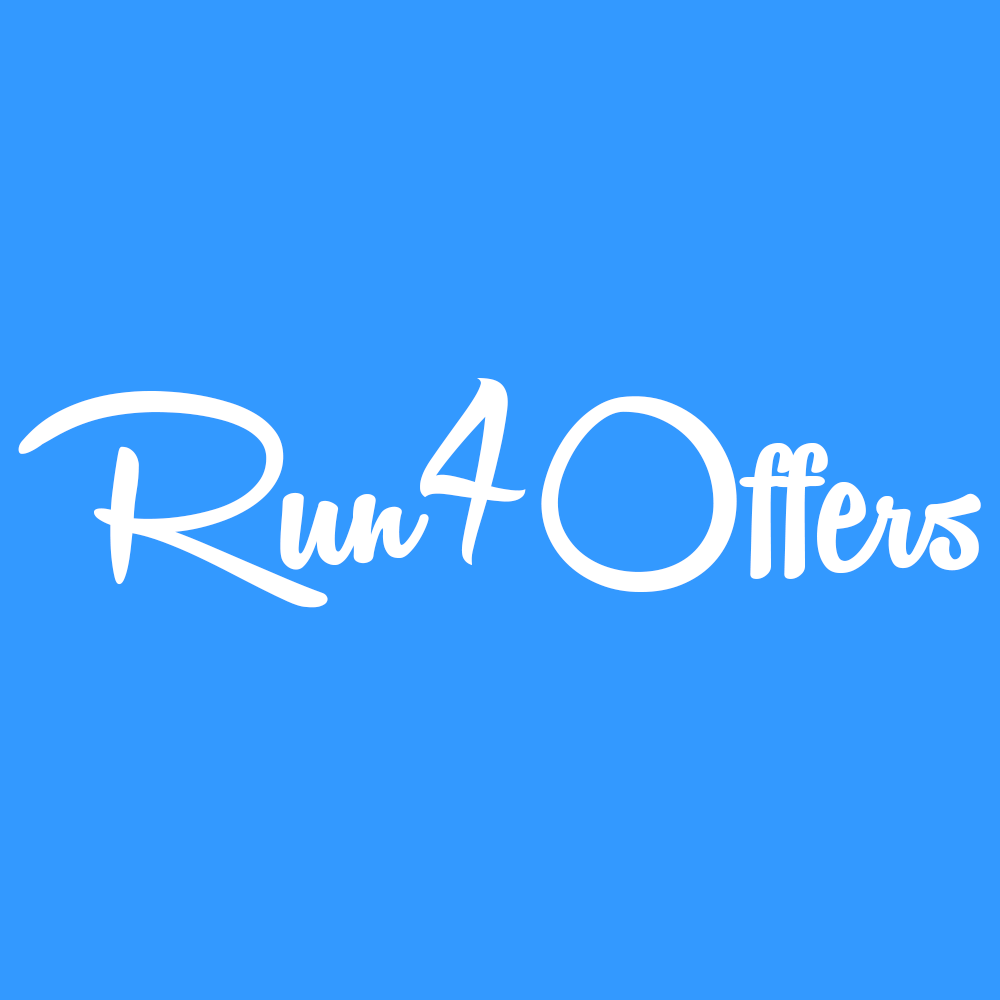
<style>
.page{position:relative;width:1000px;height:1000px;background:#3399ff}
.page>*{position:absolute;margin:0}
.t1{font:268px "RemachineScriptPersonalUse";color:#ffffff}
.t2{font:268px "DeadlyInked";color:#ffffff}
</style>
<div class="page">
<p class="t1" style="left:18px;top:377px;width:963px;height:231px">Run<span class="t2">4</span>Offers</p>
</div>
